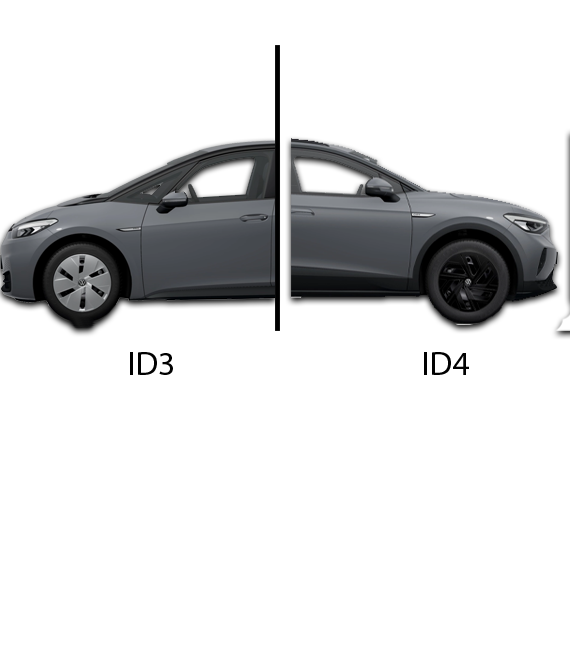
<style>
.page{position:relative;width:570px;height:660px;background:#ffffff}
.page>*{position:absolute;margin:0}
.t1{font:33.3px "MyriadPro-Regular";color:#010101}
</style>
<div class="page">
<p class="t1" style="left:130px;top:352px;width:43px;height:23px">ID3</p>
<p class="t1" style="left:424px;top:352px;width:45px;height:23px">ID4</p>
</div>
